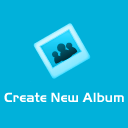
<style>
.page{position:relative;width:128px;height:128px;background:#01b1da}
.page>*{position:absolute;margin:0}
.t1{font:14px "HandelGotD-Bold";color:#ffffff}
</style>
<div class="page">
<p class="t1" style="left:4px;top:92px;width:120px;height:10px">Create New Album</p>
</div>
